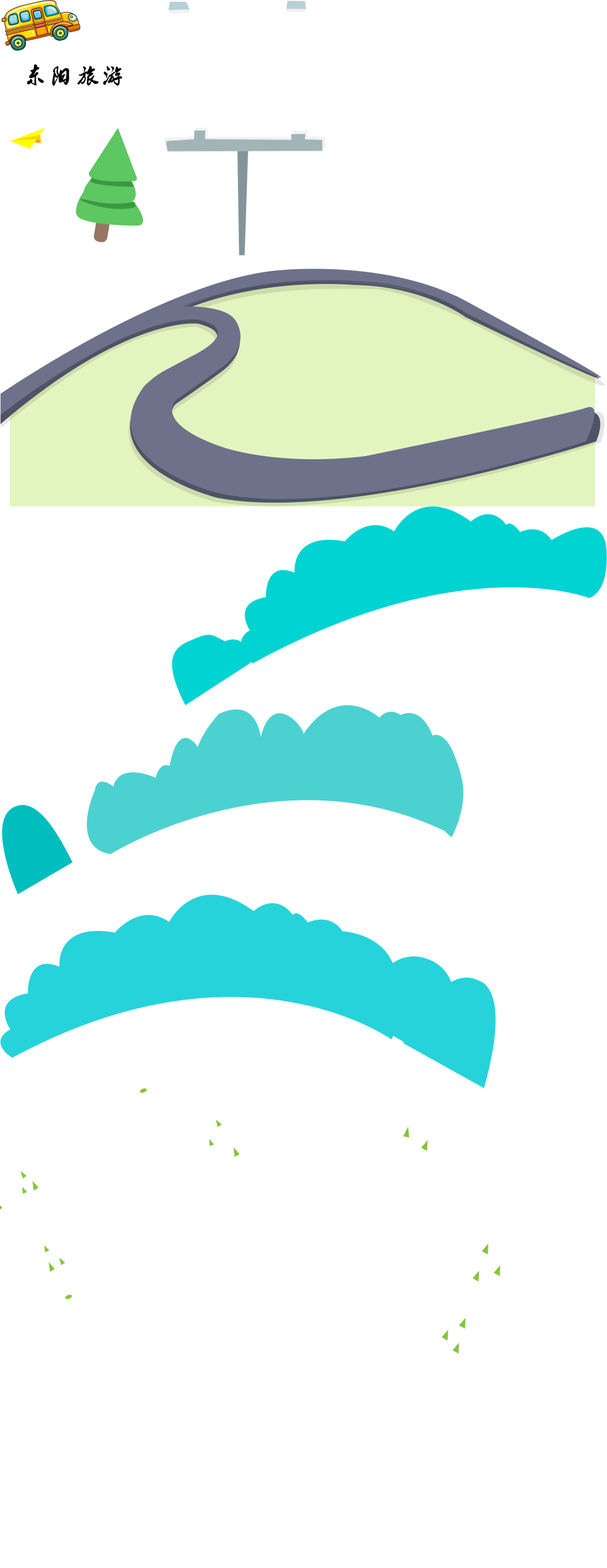
<style>
.page{position:relative;width:607px;height:1568px;background:#ffffff}
.page>*{position:absolute;margin:0}
.t1{font:26px "FZQDJW--GB1-0";color:#000000}
</style>
<div class="page">
<p class="t1" style="left:27px;top:64px;width:95px;height:22px">东阳旅游</p>
</div>
